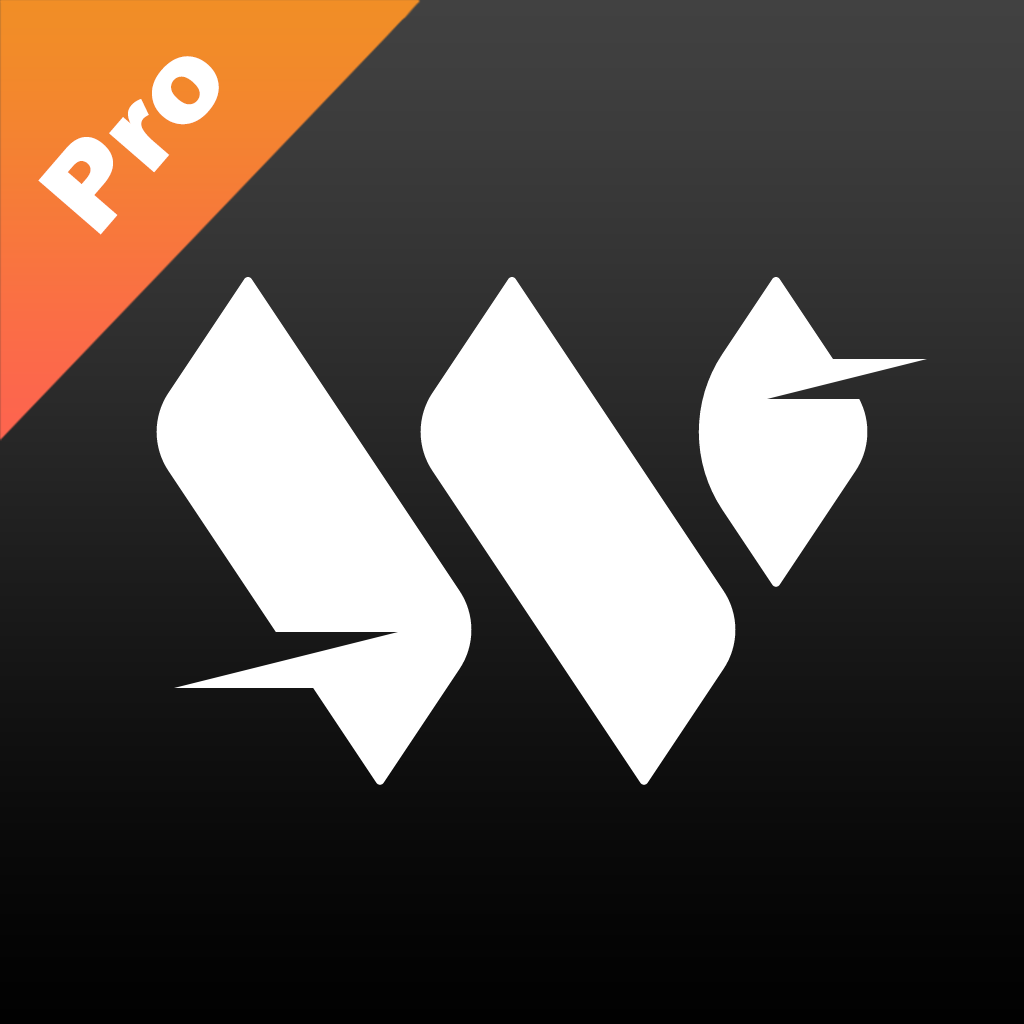
<style>
.page{position:relative;width:1024px;height:1024px}
.page>*{position:absolute;margin:0}
.t1{font:115px "Arial-Black";color:#ffffff}
</style>
<div class="page">
<p class="t1" style="left:38px;top:56px;width:181px;height:179px;rotate:-49deg">Pro</p>
</div>
